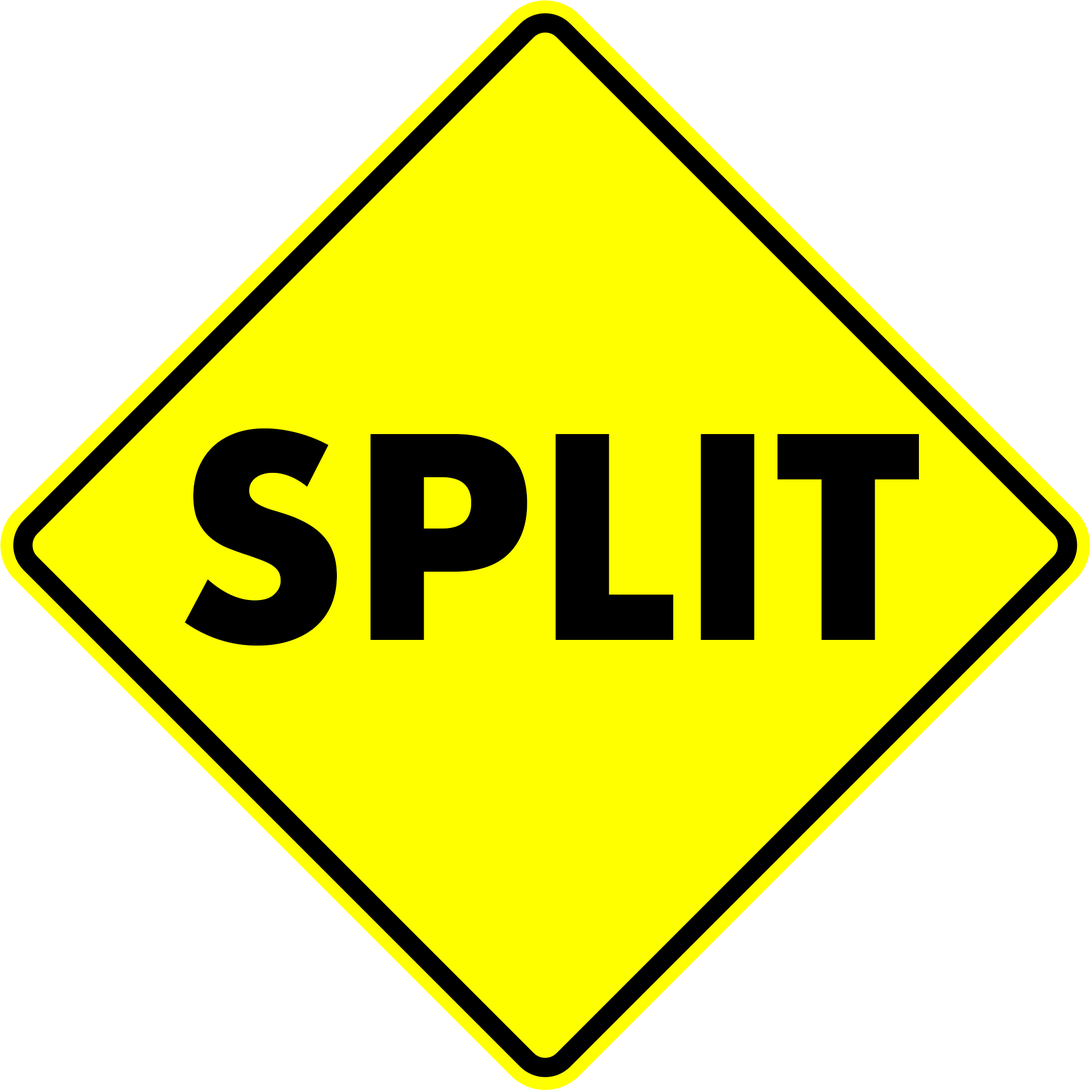
<style>
.page{position:relative;width:1092px;height:1092px;background:#ffffff}
.page>*{position:absolute;margin:0}
.t1{font:273px "Futura-Bold";color:#000000}
</style>
<div class="page">
<p class="t1" style="left:185px;top:428px;width:734px;height:218px">SPLIT</p>
</div>
